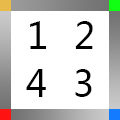
<style>
.page{position:relative;width:120px;height:120px;background:#ffffff}
.page>*{position:absolute;margin:0}
.t1{font:36px "MicrosoftYaHei";color:#000000}
</style>
<div class="page">
<p class="t1" style="left:30px;top:21px;width:16px;height:28px">1</p>
<p class="t1" style="left:75px;top:21px;width:18px;height:28px">2</p>
<p class="t1" style="left:26px;top:69px;width:20px;height:28px">4</p>
<p class="t1" style="left:75px;top:69px;width:17px;height:28px">3</p>
</div>
